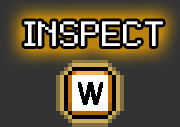
<style>
.page{position:relative;width:180px;height:127px;background:#333333}
.page>*{position:absolute;margin:0}
.t1{font:49px "Silver";color:#ffffff;scale:1.3 1}
</style>
<div class="page">
<p class="t1" style="left:24px;top:21px;width:139px;height:25px">INSPECT</p>
</div>
